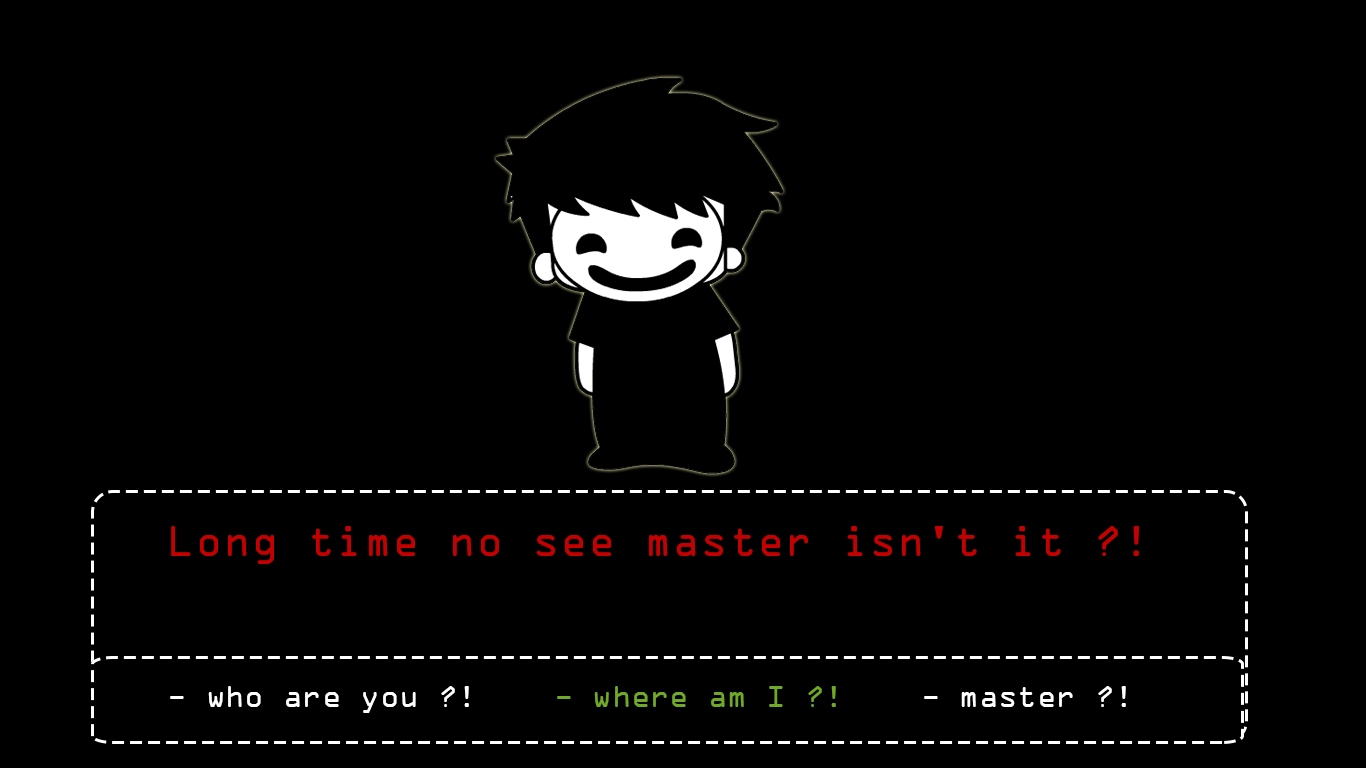
<style>
.page{position:relative;width:1366px;height:768px;background:#000000}
.page>*{position:absolute;margin:0}
.t1{font:39px "OCRAStd";color:#c40000}
.t2{font:32px "OCRAExtended";color:#ffffff}
.t3{font:32px "OCRAExtended";color:#70a828}
</style>
<div class="page">
<p class="t1" style="left:171px;top:526px;width:968px;height:38px">Long time no see master isn't it ?!</p>
<p class="t2" style="left:170px;top:686px;width:956px;height:27px">- who are you ?!    <span class="t3">- where am I ?!    </span>- master ?!</p>
</div>
